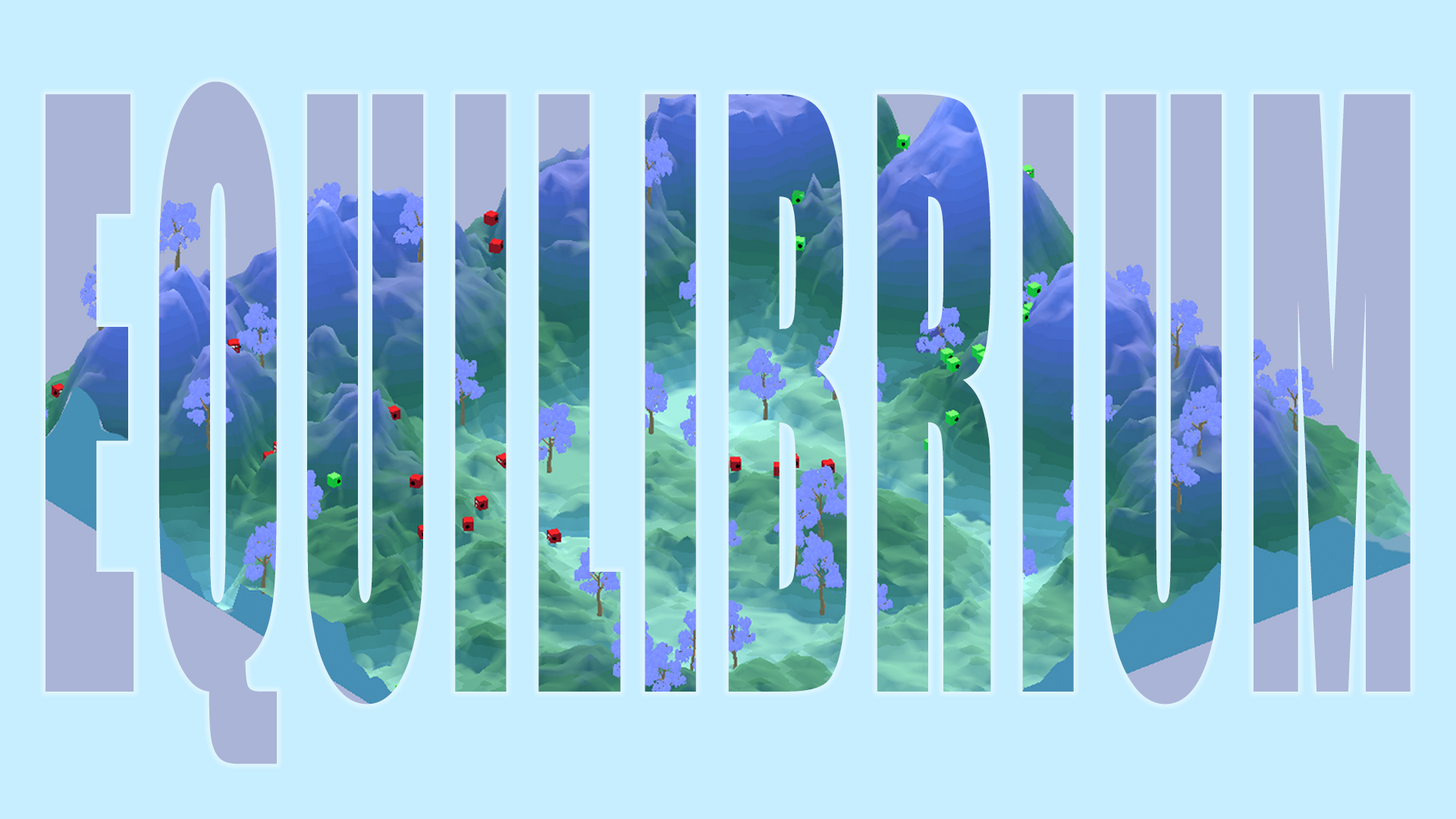
<style>
.page{position:relative;width:1456px;height:819px;background:#c6eeff}
.page>*{position:absolute;margin:0}
.t1{font:755.4px "Impact";letter-spacing:0.05em;scale:0.33 1}
</style>
<div class="page">
<p class="t1" style="left:45px;top:81px;width:1365px;height:683px">EQUILIBRIUM</p>
</div>
